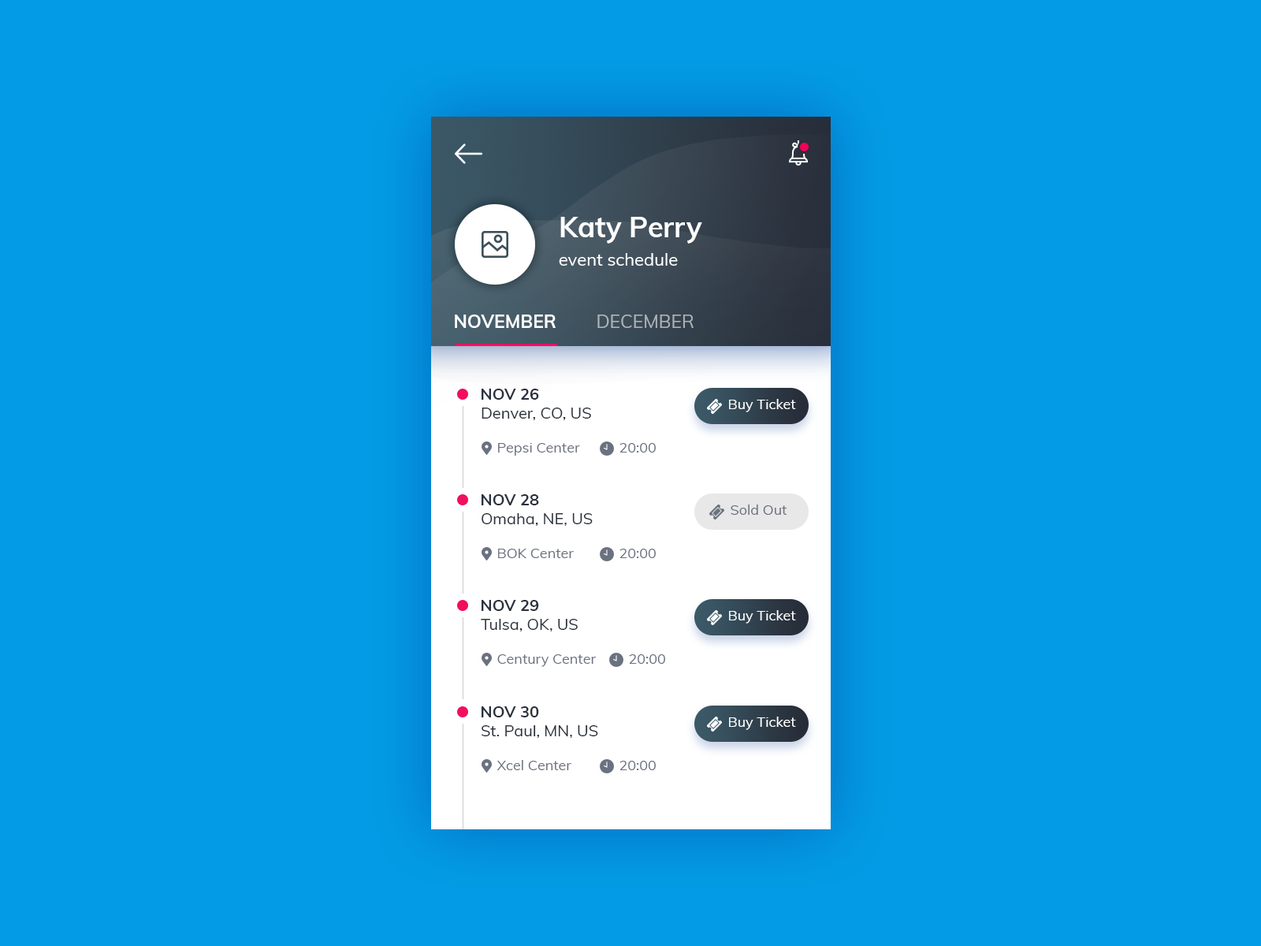
<style>
.page{position:relative;width:1261px;height:946px;background:#039be5}
.page>*{position:absolute;margin:0}
.t1{font:17.3px/28.4px "Muli-Regular";color:#ffffff}
.t2{font:28.4px/28.4px "Muli-Bold";color:#ffffff}
.t3{font:18.1px "Muli-Bold";color:#ffffff;text-transform:uppercase}
.t4{font:18.1px "Muli-Regular";color:#afb3b6;text-transform:uppercase}
.t5{font:15.8px "Muli-Bold";color:#2a313c;text-transform:uppercase}
.t6{font:14.2px "Muli-Regular";color:#ffffff}
.t7{font:15.8px "Muli-Regular";color:#2a313c}
.t8{font:14.2px "Muli-Regular";color:#6a7180}
</style>
<div class="page">
<p class="t1" style="left:559px;top:217px;width:143px;height:49px"><span class="t2">Katy Perry <br></span>event schedule</p>
<p class="t3" style="left:455px;top:314px;width:101px;height:14px">November</p>
<p class="t4" style="left:597px;top:314px;width:97px;height:14px">December</p>
<p class="t5" style="left:482px;top:389px;width:57px;height:11px">Nov 26</p>
<p class="t6" style="left:729px;top:399px;width:67px;height:13px">Buy Ticket</p>
<p class="t7" style="left:482px;top:407px;width:109px;height:13px">Denver, CO, US</p>
<p class="t8" style="left:498px;top:443px;width:82px;height:13px">Pepsi Center</p>
<p class="t8" style="left:619px;top:443px;width:37px;height:9px">20:00</p>
<p class="t5" style="left:482px;top:494px;width:57px;height:11px">Nov 28</p>
<p class="t8" style="left:731px;top:504px;width:56px;height:11px">Sold Out</p>
<p class="t7" style="left:482px;top:513px;width:111px;height:13px">Omaha, NE, US</p>
<p class="t8" style="left:498px;top:548px;width:76px;height:10px">BOK Center</p>
<p class="t8" style="left:619px;top:548px;width:37px;height:10px">20:00</p>
<p class="t5" style="left:482px;top:600px;width:57px;height:11px">Nov 29</p>
<p class="t6" style="left:729px;top:610px;width:67px;height:13px">Buy Ticket</p>
<p class="t7" style="left:481px;top:619px;width:97px;height:12px">Tulsa, OK, US</p>
<p class="t8" style="left:497px;top:654px;width:99px;height:13px">Century Center</p>
<p class="t8" style="left:629px;top:654px;width:36px;height:10px">20:00</p>
<p class="t5" style="left:482px;top:706px;width:57px;height:11px">Nov 30</p>
<p class="t7" style="left:482px;top:725px;width:116px;height:13px">St. Paul, MN, US</p>
<p class="t6" style="left:729px;top:716px;width:67px;height:14px">Buy Ticket</p>
<p class="t8" style="left:496px;top:760px;width:75px;height:10px">Xcel Center</p>
<p class="t8" style="left:619px;top:760px;width:37px;height:10px">20:00</p>
</div>
